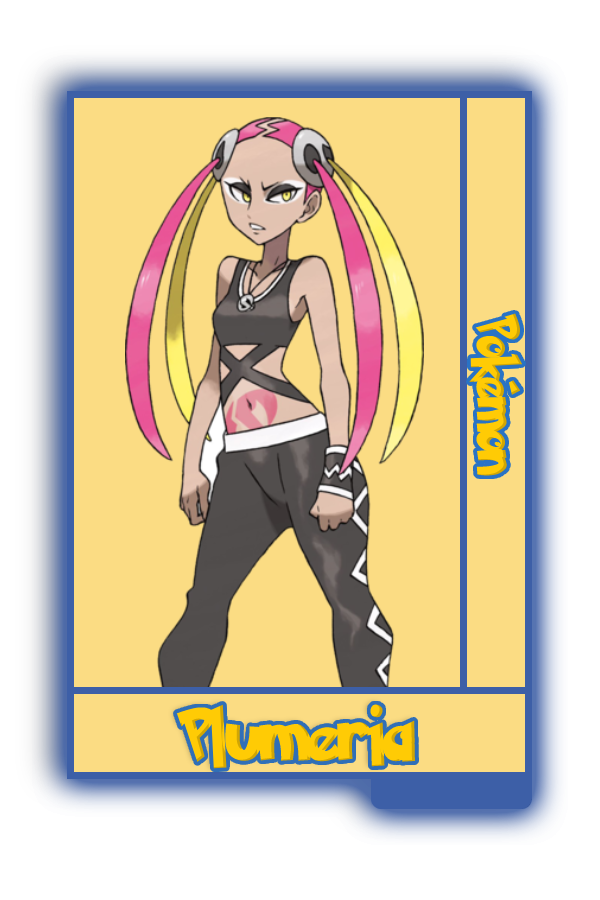
<style>
.page{position:relative;width:600px;height:900px;background:#fbdc83}
.page>*{position:absolute;margin:0}
.t1{font:48.8px "PokemonSolidNormal";color:#ffcb05;scale:0.8 1}
.t2{font:60.1px "PokemonSolidNormal";color:#ffcb05;scale:0.96 1}
</style>
<div class="page">
<p class="t1" style="left:469px;top:313px;width:54px;height:163px;rotate:90deg">Pokémon</p>
<p class="t2" style="left:176px;top:704px;width:239px;height:65px">Plumeria</p>
</div>
